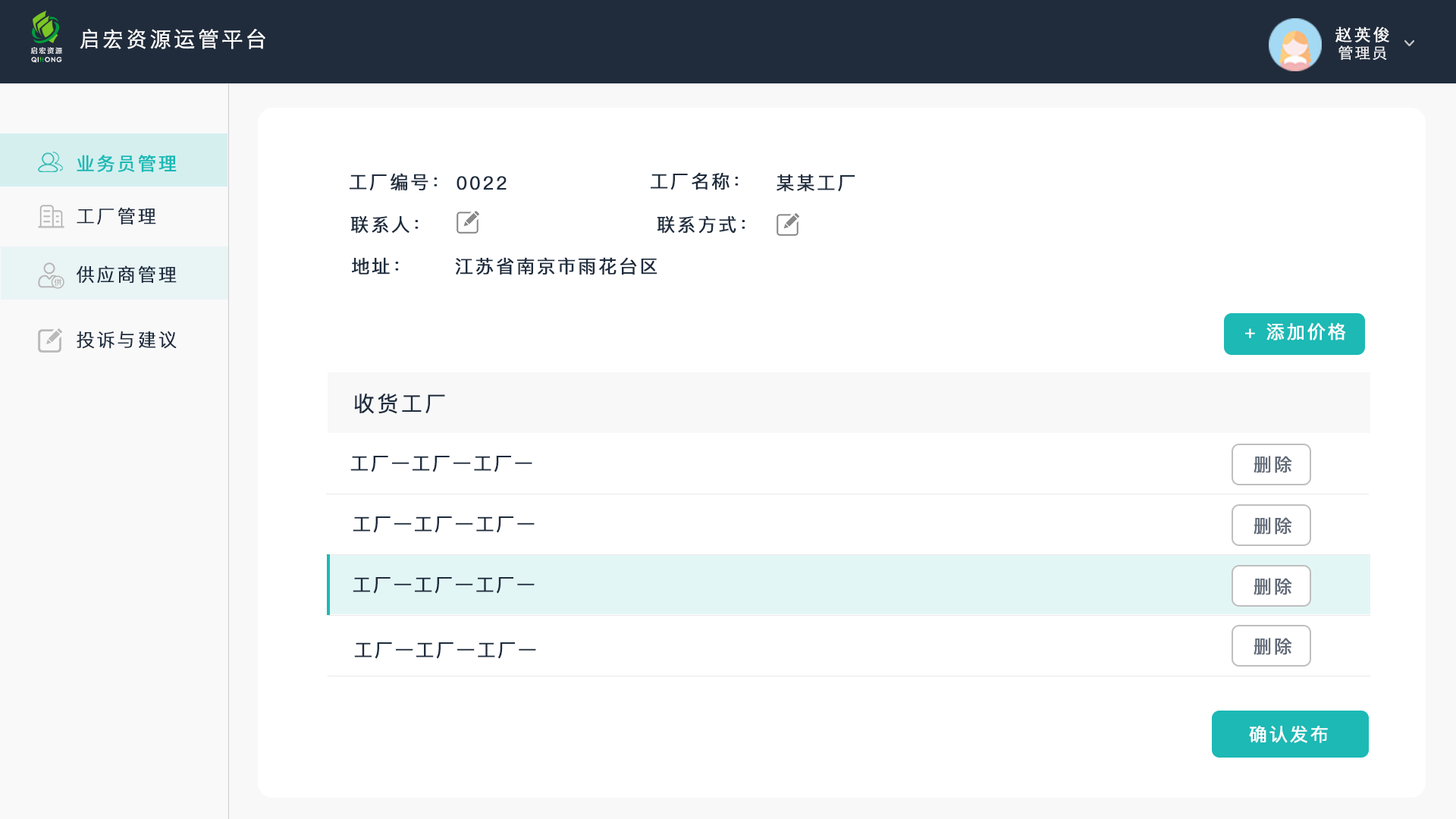
<style>
.page{position:relative;width:1456px;height:819px;background:#ffffff}
.page>*{position:absolute;margin:0}
.t1{font:21.2px "STHeitiSC-Light";letter-spacing:0.1em;color:#ffffff;font-weight:bold}
.t2{font:16.7px "STHeitiSC-Light";letter-spacing:0.1em;color:#ffffff;font-weight:bold}
.t3{font:7px "FZLTZHK--GBK1-0";letter-spacing:0.18em;color:#ffffff}
.t4{font:15.2px "STHeitiSC-Light";letter-spacing:0.1em;color:#ffffff;font-weight:bold}
.t5{font:6.3px "CenturyGothic";letter-spacing:0.1em;color:#ffffff;font-weight:bold}
.t6{font:18.2px "PingFangSC-Regular";letter-spacing:0.1em;color:#1cb9b5;font-weight:bold}
.t7{font:18.2px "PingFangSC-Regular";letter-spacing:0.1em;color:#1e2c3e;font-weight:bold}
.t8{font:18.2px "PingFangSC-Light";letter-spacing:0.1em;color:#1e2c3e;font-weight:bold}
.t9{font:18.2px "PingFangSC-Regular";letter-spacing:0.1em;color:#ffffff;font-weight:bold}
.t10{font:21.2px "PingFangSC-Regular";letter-spacing:0.1em;color:#1e2c3e;font-weight:bold}
.t11{font:18.2px "PingFangSC-Regular";letter-spacing:0.1em;color:#626b78;font-weight:bold}
</style>
<div class="page">
<p class="t1" style="left:80px;top:29px;width:185px;height:20px">启宏资源运管平台</p>
<p class="t2" style="left:1335px;top:27px;width:54px;height:15px">赵英俊</p>
<p class="t3" style="left:31px;top:47px;width:31px;height:7px">启宏资源</p>
<p class="t4" style="left:1338px;top:45px;width:49px;height:15px;opacity:0.9">管理员</p>
<p class="t5" style="left:31px;top:57px;width:31px;height:6px">QI  ONG</p>
<p class="t6" style="left:77px;top:155px;width:100px;height:17px">业务员管理</p>
<p class="t7" style="left:350px;top:173px;width:88px;height:18px">工厂编号：</p>
<p class="t7" style="left:651px;top:172px;width:88px;height:18px">工厂名称：</p>
<p class="t7" style="left:457px;top:176px;width:50px;height:14px">0022</p>
<p class="t7" style="left:777px;top:174px;width:78px;height:18px">某某工厂</p>
<p class="t8" style="left:77px;top:207px;width:79px;height:17px">工厂管理</p>
<p class="t7" style="left:350px;top:216px;width:69px;height:18px">联系人：</p>
<p class="t7" style="left:657px;top:215px;width:88px;height:19px">联系方式：</p>
<p class="t7" style="left:351px;top:257px;width:48px;height:18px">地址：</p>
<p class="t7" style="left:455px;top:257px;width:202px;height:18px">江苏省南京市雨花台区</p>
<p class="t8" style="left:77px;top:265px;width:100px;height:18px">供应商管理</p>
<p class="t9" style="left:1245px;top:323px;width:101px;height:17px">+ 添加价格</p>
<p class="t8" style="left:77px;top:331px;width:100px;height:18px">投诉与建议</p>
<p class="t10" style="left:354px;top:393px;width:91px;height:21px">收货工厂</p>
<p class="t7" style="left:350px;top:456px;width:182px;height:16px">工厂一工厂一工厂一</p>
<p class="t11" style="left:1254px;top:456px;width:38px;height:17px">删除</p>
<p class="t7" style="left:353px;top:516px;width:182px;height:17px">工厂一工厂一工厂一</p>
<p class="t11" style="left:1254px;top:517px;width:38px;height:18px">删除</p>
<p class="t7" style="left:353px;top:577px;width:182px;height:17px">工厂一工厂一工厂一</p>
<p class="t11" style="left:1254px;top:578px;width:38px;height:17px">删除</p>
<p class="t11" style="left:1254px;top:638px;width:38px;height:17px">删除</p>
<p class="t7" style="left:354px;top:642px;width:182px;height:17px">工厂一工厂一工厂一</p>
<p class="t9" style="left:1249px;top:726px;width:79px;height:17px">确认发布</p>
</div>
